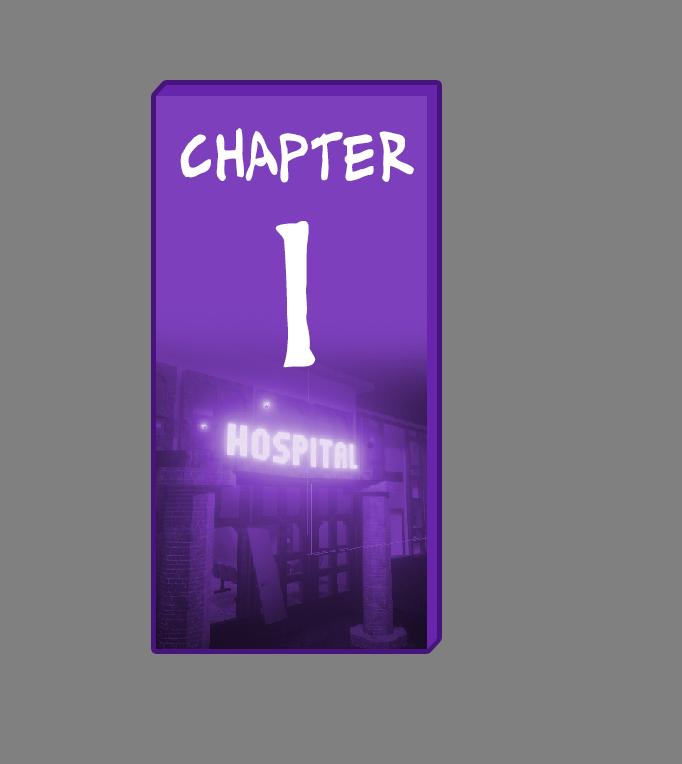
<style>
.page{position:relative;width:682px;height:764px;background:#808080}
.page>*{position:absolute;margin:0}
.t1{font:61px "AlexToth";color:#ffffff;scale:0.83 1}
.t2{font:174px "AlexToth";color:#ffffff;scale:0.83 1}
</style>
<div class="page">
<p class="t1" style="left:180px;top:128px;width:234px;height:55px">Chapter</p>
<p class="t2" style="left:275px;top:221px;width:41px;height:147px">1</p>
</div>
